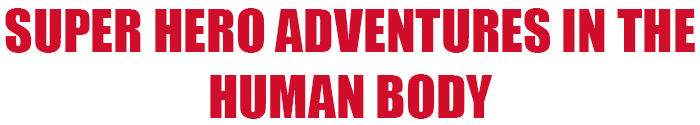
<style>
.page{position:relative;width:700px;height:125px;background:#ffffff}
.page>*{position:absolute;margin:0}
.t1{font:54.8px "Impact";color:#d00e2b;font-variant:small-caps}
</style>
<div class="page">
<p class="t1" style="left:5px;top:8px;width:690px;height:111px;text-align:center">SUPER HERO ADVENTURES IN THE<br>HUMAN BODY</p>
</div>
